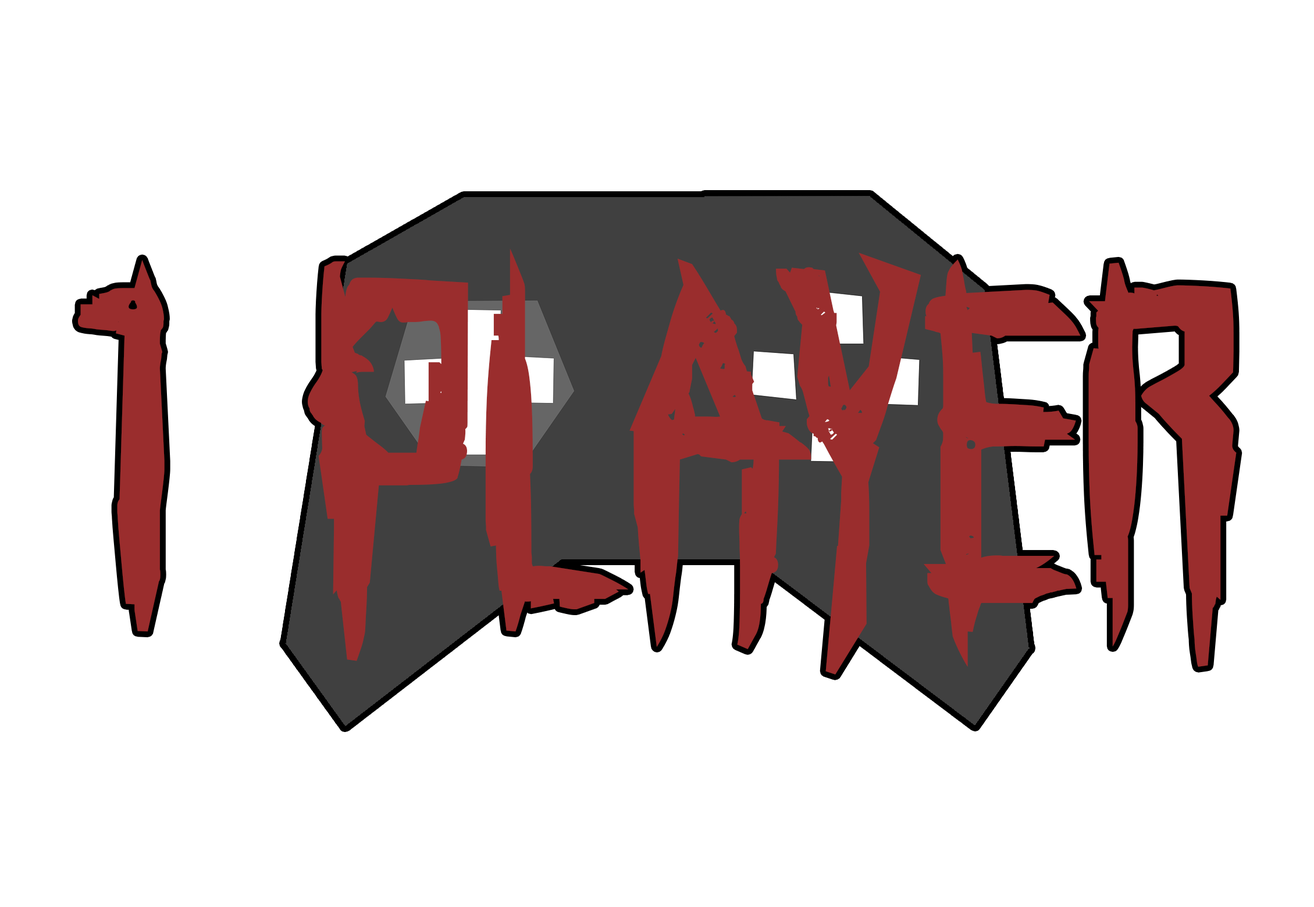
<style>
.page{position:relative;width:1314px;height:907px;background:#ffffff}
.page>*{position:absolute;margin:0}
.t1{font:452.8px "HorroroidBold";color:#9a2d2d}
</style>
<div class="page">
<p class="t1" style="left:78px;top:248px;width:1159px;height:427px">1 PLAYER</p>
</div>
